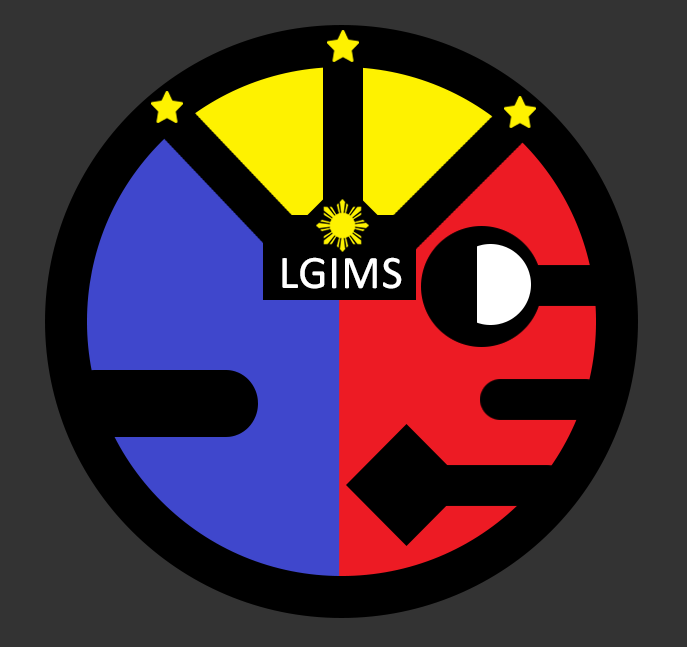
<style>
.page{position:relative;width:687px;height:647px;background:#333333}
.page>*{position:absolute;margin:0}
.t1{font:46.3px "Calibri";color:#ffffff;text-transform:uppercase;font-weight:bold}
</style>
<div class="page">
<p class="t1" style="left:282px;top:257px;width:120px;height:32px">LGIMS</p>
</div>
